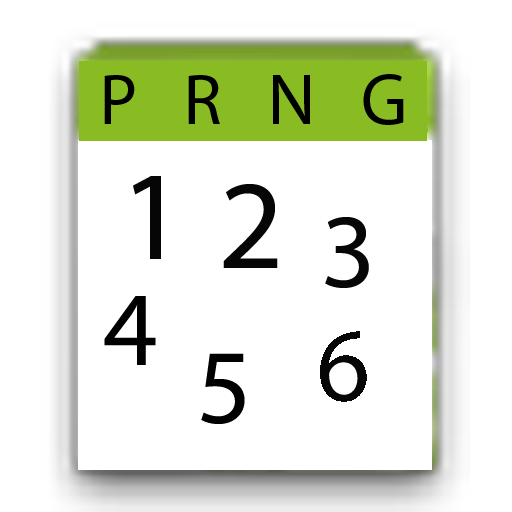
<style>
.page{position:relative;width:512px;height:512px;background:#ffffff}
.page>*{position:absolute;margin:0}
.t1{font:72px "MyriadPro-Regular";color:#000000}
.t2{font:128px "MyriadPro-Regular";color:#060606}
.t3{font:106.7px "MyriadPro-Regular";color:#060606}
.t4{font:106.7px "MyriadPro-Regular";color:#000000}
</style>
<div class="page">
<p class="t1" style="left:104px;top:74px;width:300px;height:51px">P   R   N   G</p>
<p class="t2" style="left:133px;top:176px;width:28px;height:83px">1</p>
<p class="t2" style="left:223px;top:184px;width:55px;height:84px">2</p>
<p class="t3" style="left:325px;top:217px;width:44px;height:71px">3</p>
<p class="t4" style="left:104px;top:296px;width:52px;height:69px">4</p>
<p class="t4" style="left:201px;top:353px;width:44px;height:71px">5</p>
</div>
